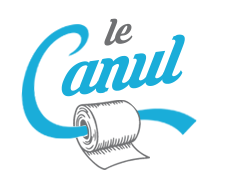
<style>
.page{position:relative;width:236px;height:177px;background:#ffffff}
.page>*{position:absolute;margin:0}
.t1{font:48px "KrinkesDecorPERSONALUSE";color:#707173}
.t2{font:85px "KrinkesDecorPERSONALUSE";color:#1aadd9}
</style>
<div class="page">
<p class="t1" style="left:104px;top:18px;width:29px;height:28px">le</p>
<p class="t2" style="left:61px;top:34px;width:124px;height:63px">anul</p>
</div>
